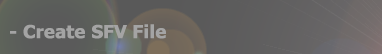
<style>
.page{position:relative;width:382px;height:54px}
.page>*{position:absolute;margin:0}
.t1{font:18px "Tahoma-Bold";color:#a4a4a4;font-weight:bold}
</style>
<div class="page">
<p class="t1" style="left:10px;top:24px;width:156px;height:15px">- Create SFV File</p>
</div>
